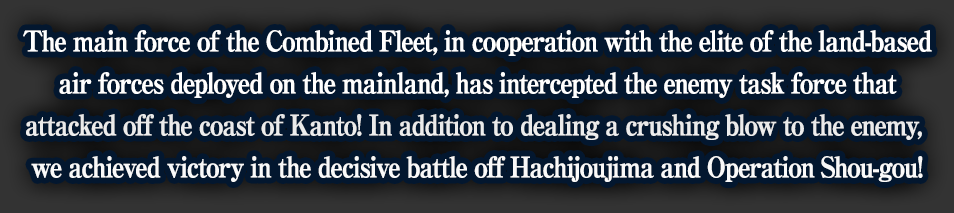
<style>
.page{position:relative;width:954px;height:213px;background:#03172f}
.page>*{position:absolute;margin:0}
.t1{font:28px/42px "RyuminPro-ExBold";letter-spacing:-0.08em;color:#ffffff;font-weight:bold;scale:0.9 1}
</style>
<div class="page">
<p class="t1" style="left:23px;top:30px;width:909px;height:152px;text-align:center">The main force of the Combined Fleet, in cooperation with the elite of the land-based<br>air forces deployed on the mainland, has intercepted the enemy task force that<br>attacked off the coast of Kanto! In addition to dealing a crushing blow to the enemy, <br>we achieved victory in the decisive battle off Hachijoujima and Operation Shou-gou!</p>
</div>
